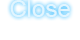
<style>
.page{position:relative;width:80px;height:40px;background:#ffffff}
.page>*{position:absolute;margin:0}
.t1{font:24px "ArialMT";color:#e1f5ff}
</style>
<div class="page">
<p class="t1" style="left:10px;top:0px;width:60px;height:17px">Close</p>
</div>
